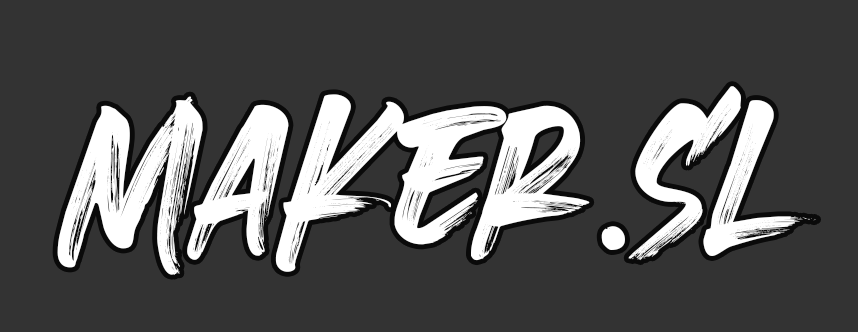
<style>
.page{position:relative;width:858px;height:332px;background:#333333}
.page>*{position:absolute;margin:0}
.t1{font:316px "Heaters";color:#ffffff}
</style>
<div class="page">
<p class="t1" style="left:57px;top:86px;width:760px;height:189px">maker.sl</p>
</div>
